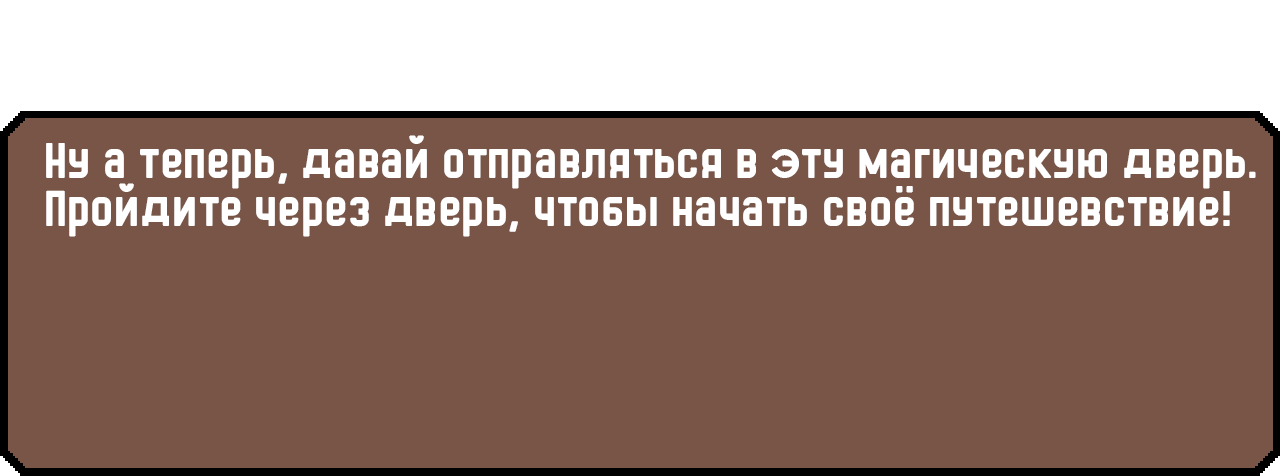
<style>
.page{position:relative;width:1280px;height:476px;background:#795548}
.page>*{position:absolute;margin:0}
.t1{font:48px/48px "HermanoMayor";color:#ffffff}
</style>
<div class="page">
<p class="t1" style="left:46px;top:135px;width:1210px;height:102px">Ну а теперь, давай отправляться в эту магическую дверь.<br>Пройдите через дверь, чтобы начать своё путешевствие!</p>
</div>
